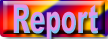
<style>
.page{position:relative;width:108px;height:39px}
.page>*{position:absolute;margin:0}
.t1{font:40px "Arial-Black";scale:0.59 1}
</style>
<div class="page">
<p class="t1" style="left:13px;top:4px;width:85px;height:37px">Report</p>
</div>
